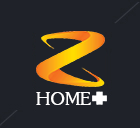
<style>
.page{position:relative;width:140px;height:128px;background:#1f2229}
.page>*{position:absolute;margin:0}
.t1{font:29px "JasmineUPC";color:#ffffff}
</style>
<div class="page">
<p class="t1" style="left:36px;top:92px;width:55px;height:13px">HOME</p>
</div>
